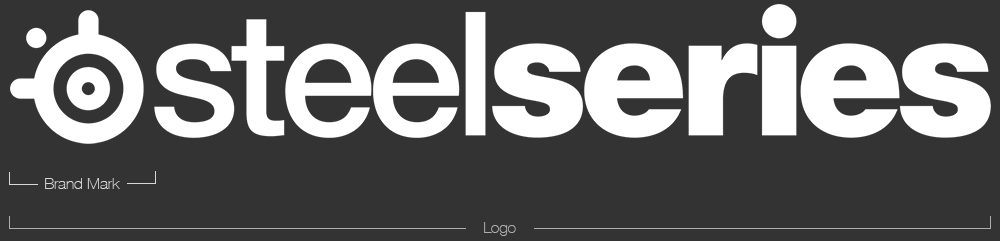
<style>
.page{position:relative;width:1000px;height:241px;background:#333333}
.page>*{position:absolute;margin:0}
.t1{font:16px "HelveticaNeue-Thin";letter-spacing:-0.01em;color:#d7d7d7}
.t2{font:16px "HelveticaNeue-Thin";letter-spacing:-0.01em;color:#aeaeae}
</style>
<div class="page">
<p class="t1" style="left:45px;top:178px;width:75px;height:11px">Brand Mark</p>
<p class="t2" style="left:484px;top:222px;width:32px;height:14px">Logo</p>
</div>
